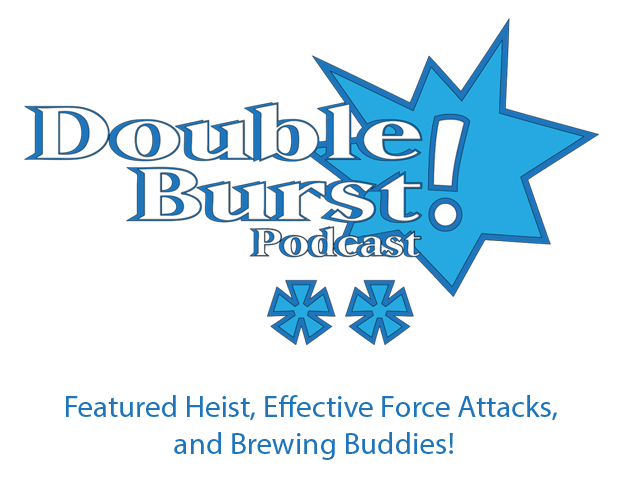
<style>
.page{position:relative;width:628px;height:500px;background:#ffffff}
.page>*{position:absolute;margin:0}
.t1{font:31px "MyriadPro-Regular";color:#1e75bb}
</style>
<div class="page">
<p class="t1" style="left:66px;top:395px;width:491px;height:65px;text-align:center">Featured Heist, Effective Force Attacks, <br>and Brewing Buddies!</p>
</div>
